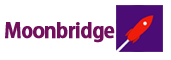
<style>
.page{position:relative;width:171px;height:60px;background:#ffffff}
.page>*{position:absolute;margin:0}
.t1{font:20px "AdobeGothicStd-Bold";letter-spacing:-0.05em;color:#72105d;font-weight:bold}
</style>
<div class="page">
<p class="t1" style="left:5px;top:22px;width:110px;height:21px">Moonbridge</p>
</div>
